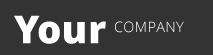
<style>
.page{position:relative;width:213px;height:55px;background:#333333}
.page>*{position:absolute;margin:0}
.t1{font:38.4px "OpenSans-Extrabold";letter-spacing:0.025em;color:#ffffff}
.t2{font:38.4px "OpenSans-Extrabold";color:#ffffff}
.t3{font:14.4px "OpenSans-Light";letter-spacing:0.025em}
</style>
<div class="page">
<p class="t1" style="left:14px;top:15px;width:26px;height:29px">Y</p>
<p class="t1" style="left:38px;top:21px;width:68px;height:23px"><span class="t2">o</span>ur</p>
<p class="t3" style="left:115px;top:21px;width:69px;height:12px">COMPANY</p>
</div>
